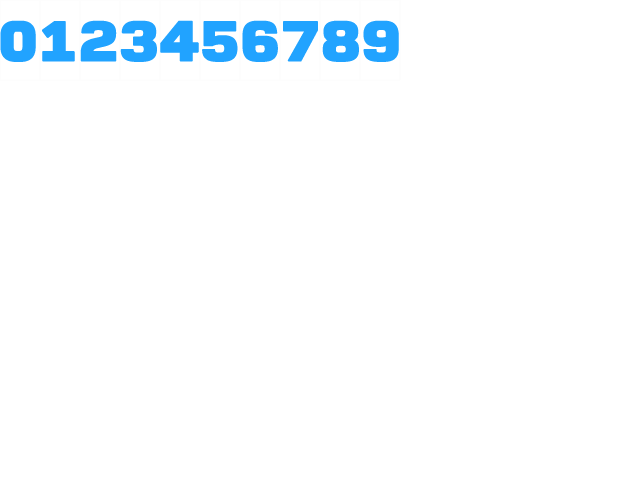
<style>
.page{position:relative;width:640px;height:480px;background:#ffffff}
.page>*{position:absolute;margin:0}
.t1{font:54px "Moire-ExtraBold";color:#21a3ff;font-weight:bold}
</style>
<div class="page">
<p class="t1" style="left:0px;top:20px;width:399px;height:42px">0123456789</p>
</div>
